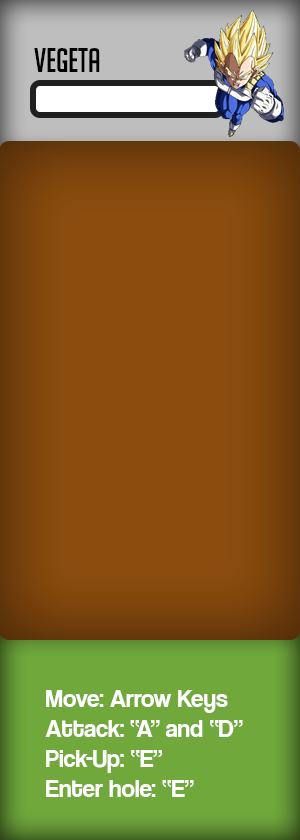
<style>
.page{position:relative;width:300px;height:840px;background:#8b4c0e}
.page>*{position:absolute;margin:0}
.t1{font:33.3px "BigNoodleTitling";color:#000000}
.t2{font:25px "CoolveticaRg-Regular";color:#ffffff}
</style>
<div class="page">
<p class="t1" style="left:34px;top:48px;width:66px;height:24px">Vegeta</p>
<p class="t2" style="left:45px;top:690px;width:198px;height:107px">Move: Arrow Keys<br>Attack: “A” and “D”<br>Pick-Up: “E”<br>Enter hole: “E”</p>
</div>
